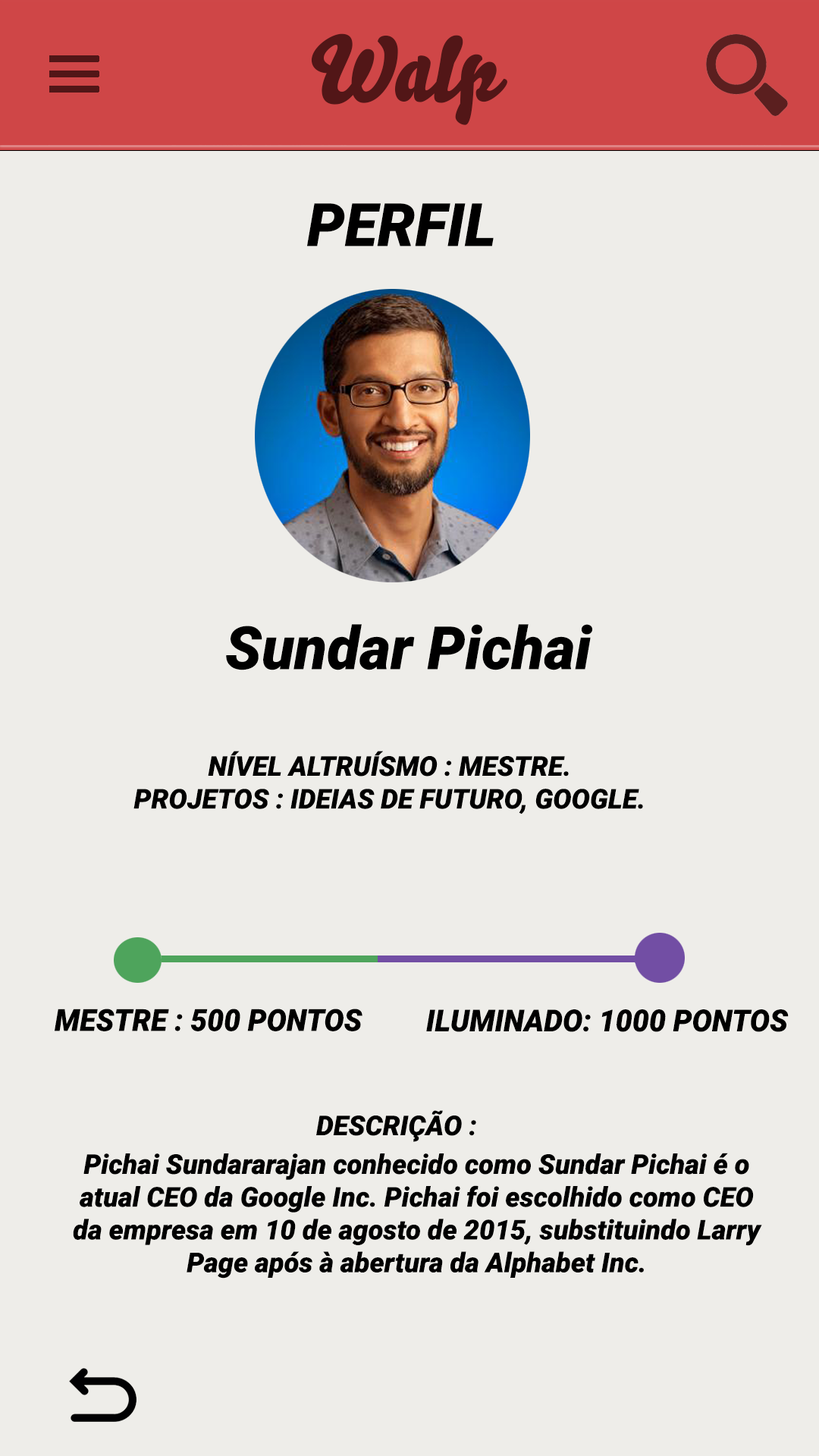
<style>
.page{position:relative;width:819px;height:1456px;background:#eeede9}
.page>*{position:absolute;margin:0}
.t1{font:90.5px "Bello-Pro";color:#521617}
.t2{font:59.6px "Roboto-BlackItalic";color:#000000}
.t3{font:27.3px "Roboto-BlackItalic";color:#000000}
.t4{font:30.3px "Roboto-BlackItalic";color:#000000}
</style>
<div class="page">
<p class="t1" style="left:311px;top:33px;width:196px;height:92px">Walp</p>
<p class="t2" style="left:307px;top:203px;width:187px;height:43px">PERFIL</p>
<p class="t2" style="left:226px;top:624px;width:366px;height:46px">Sundar Pichai</p>
<p class="t3" style="left:133px;top:751px;width:510px;height:63px;text-align:center">NÍVEL ALTRUÍSMO : MESTRE.<br>PROJETOS : IDEIAS DE FUTURO, GOOGLE.</p>
<p class="t4" style="left:55px;top:1009px;width:307px;height:22px">MESTRE : 500 PONTOS</p>
<p class="t4" style="left:426px;top:1009px;width:363px;height:23px">ILUMINADO: 1000 PONTOS</p>
<p class="t3" style="left:316px;top:1110px;width:160px;height:32px">DESCRIÇÃO :</p>
<p class="t3" style="left:73px;top:1153px;width:689px;height:126px;text-align:center">Pichai Sundararajan conhecido como Sundar Pichai é o atual CEO da Google Inc. Pichai foi escolhido como CEO da empresa em 10 de agosto de 2015, substituindo Larry Page após à abertura da Alphabet Inc.</p>
</div>
